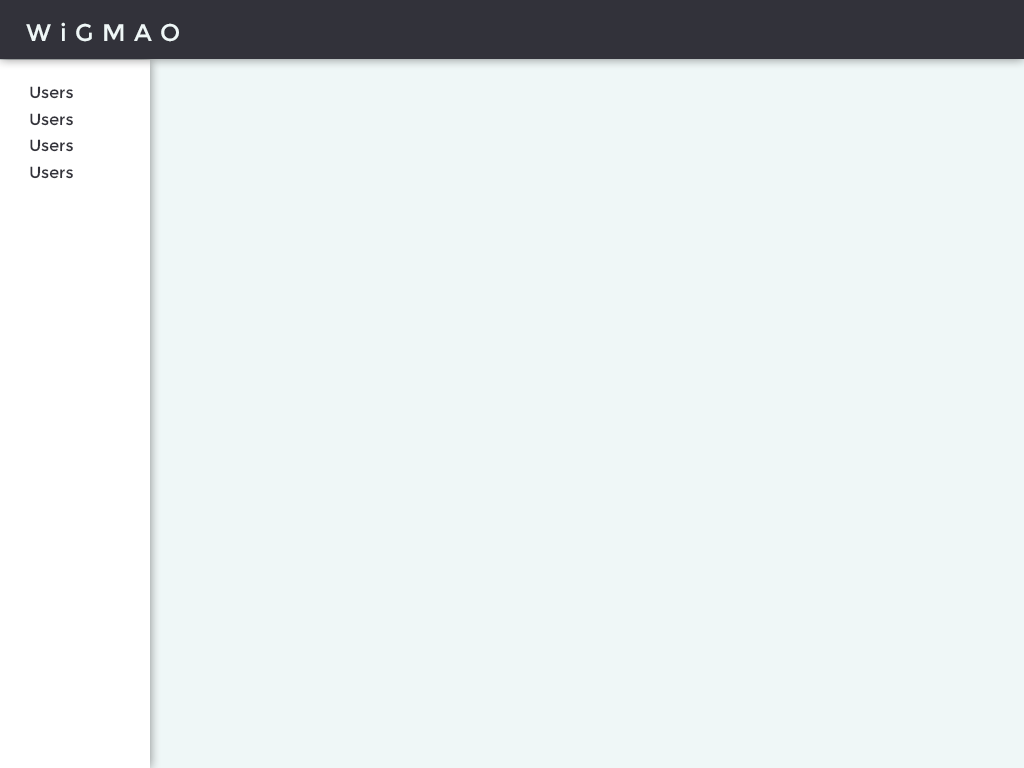
<style>
.page{position:relative;width:1024px;height:768px;background:#eff7f7}
.page>*{position:absolute;margin:0}
.t1{font:24px "Montserrat-Regular";letter-spacing:0.36em;color:#eff7f7}
.t2{font:16px "Montserrat-Regular";color:#32323a}
</style>
<div class="page">
<p class="t1" style="left:26px;top:22px;width:153px;height:20px">WiGMAO</p>
<p class="t2" style="left:30px;top:86px;width:43px;height:13px">Users</p>
<p class="t2" style="left:30px;top:113px;width:43px;height:13px">Users</p>
<p class="t2" style="left:30px;top:139px;width:43px;height:13px">Users</p>
<p class="t2" style="left:30px;top:166px;width:43px;height:13px">Users</p>
</div>
